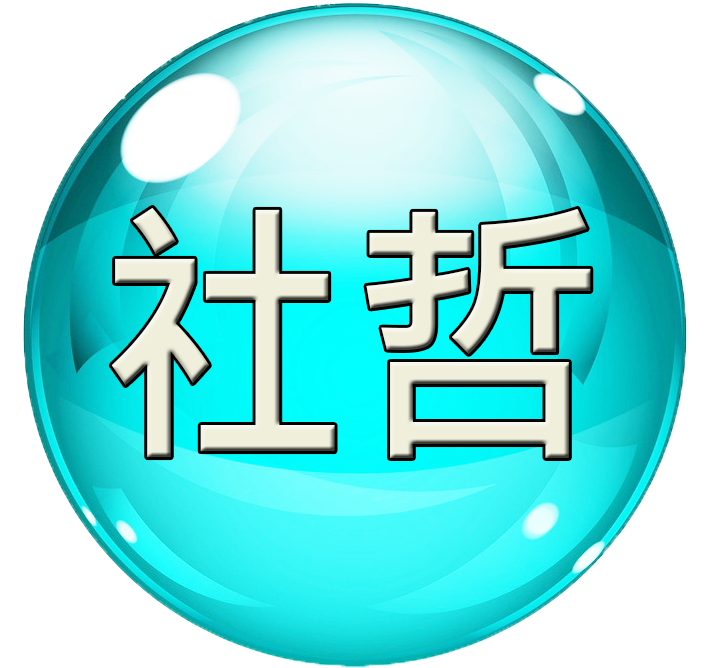
<style>
.page{position:relative;width:717px;height:668px;background:#ffffff}
.page>*{position:absolute;margin:0}
.t1{font:283.1px "MicrosoftJhengHeiBold";color:#f0efdc;scale:0.9 1}
</style>
<div class="page">
<p class="t1" style="left:111px;top:207px;width:480px;height:251px">社哲</p>
</div>
